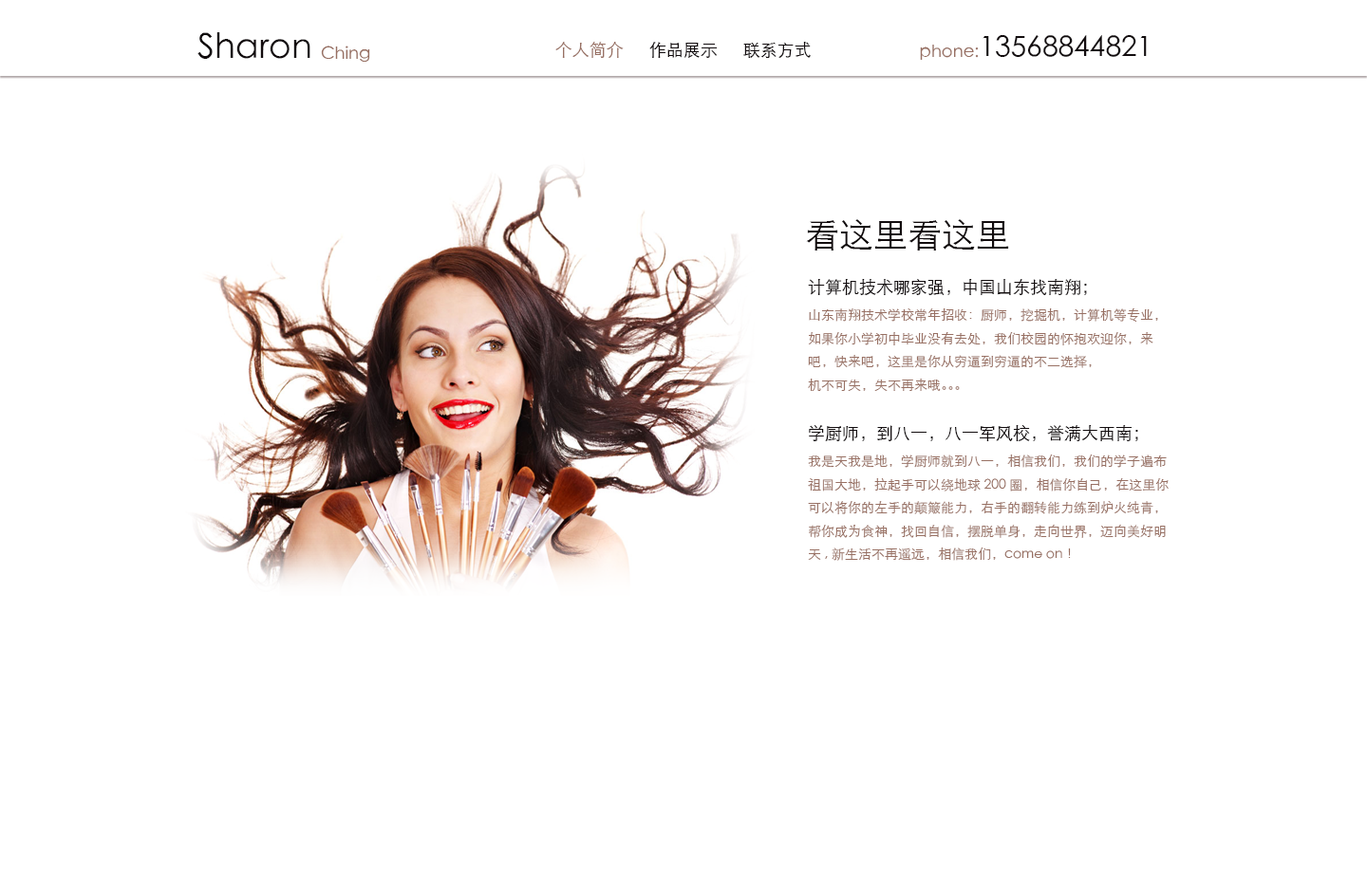
<style>
.page{position:relative;width:1367px;height:872px;background:#ffffff}
.page>*{position:absolute;margin:0}
.t1{font:34.2px "STHeitiSC-Light";color:#120c0e}
.t2{font:17.1px "STHeitiSC-Light";color:#987063}
.t3{font:17.1px "STHeitiSC-Light";color:#120c0e}
.t4{font:28.5px "STHeitiSC-Light";color:#120c0e}
.t5{font:13.3px "STHeitiSC-Light";color:#987063}
</style>
<div class="page">
<p class="t1" style="left:197px;top:32px;width:173px;height:30px">Sharon <span class="t2">Ching</span></p>
<p class="t3" style="left:555px;top:42px;width:256px;height:16px"><span class="t2">个人简介</span>      作品展示      联系方式</p>
<p class="t4" style="left:920px;top:35px;width:227px;height:25px"><span class="t2">phone:</span>13568844821</p>
<p class="t1" style="left:806px;top:219px;width:203px;height:32px">看这里看这里</p>
<p class="t5" style="left:808px;top:279px;width:361px;height:282px"><span class="t3">计算机技术哪家强，中国山东找南翔；<br></span>山东南翔技术学校常年招收：厨师，挖掘机，计算机等专业，<br>如果你小学初中毕业没有去处，我们校园的怀抱欢迎你，来<br>吧，快来吧，这里是你从穷逼到穷逼的不二选择，<br>机不可失，失不再来哦。。。<br><br><span class="t3">学厨师，到八一，八一军风校，誉满大西南；<br></span>我是天我是地，学厨师就到八一，相信我们，我们的学子遍布<br>祖国大地，拉起手可以绕地球200圈，相信你自己，在这里你<br>可以将你的左手的颠簸能力，右手的翻转能力练到炉火纯青，<br>帮你成为食神，找回自信，摆脱单身，走向世界，迈向美好明<br>天,新生活不再遥远，相信我们，come on！</p>
</div>
